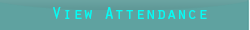
<style>
.page{position:relative;width:250px;height:30px;background:#5fa2a0}
.page>*{position:absolute;margin:0}
.t1{font:16.7px "OratorStd";color:#00fef6;scale:1.04 1}
</style>
<div class="page">
<p class="t1" style="left:53px;top:7px;width:154px;height:12px">View Attendance</p>
</div>
